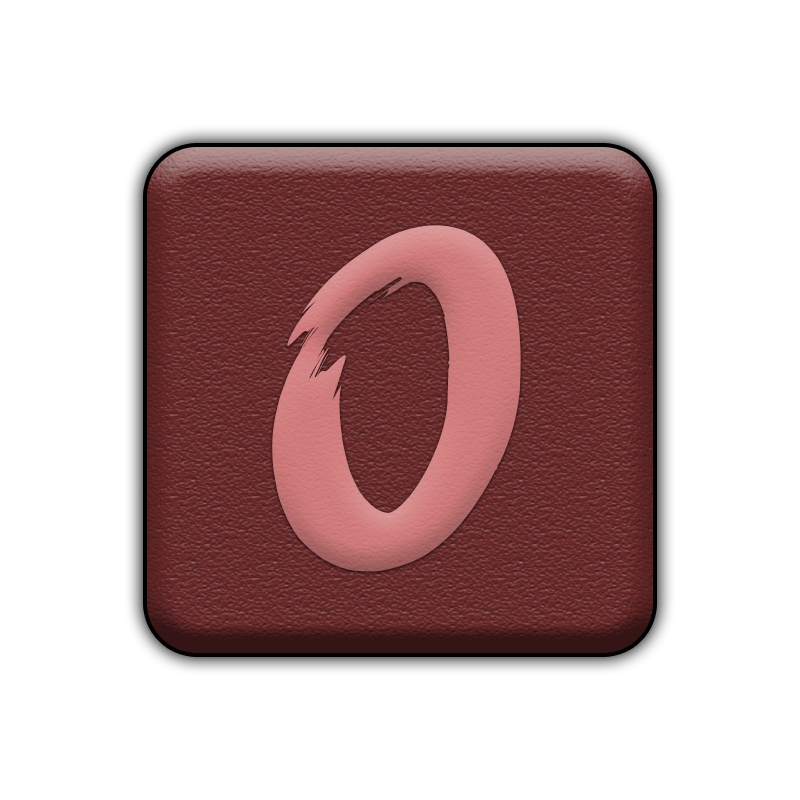
<style>
.page{position:relative;width:800px;height:800px;background:#ffffff}
.page>*{position:absolute;margin:0}
.t1{font:436.5px "PinkBlue";color:#d17b7b;scale:1.4 1}
</style>
<div class="page">
<p class="t1" style="left:272px;top:225px;width:249px;height:347px;rotate:-31deg">o</p>
</div>
